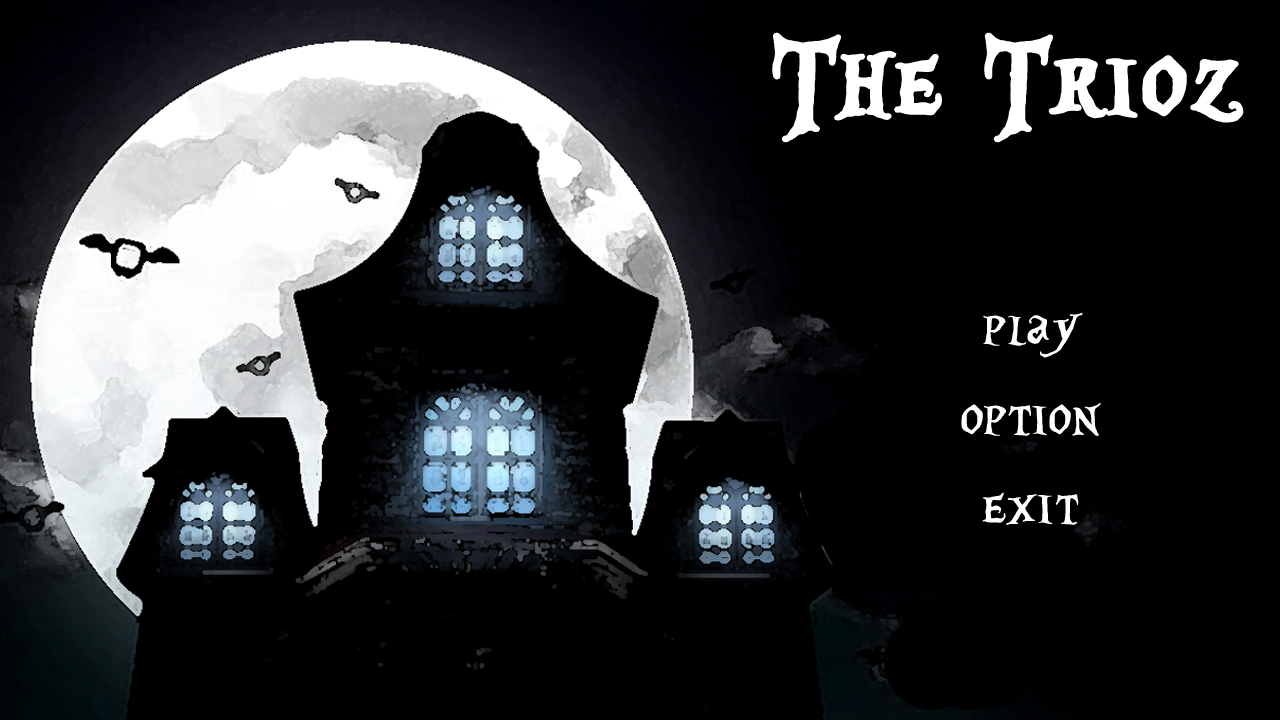
<style>
.page{position:relative;width:1280px;height:720px;background:#000000}
.page>*{position:absolute;margin:0}
.t1{font:142px "AliceinWonderland";color:#ffffff;font-weight:bold}
.t2{font:74px "AliceinWonderland";color:#ffffff}
</style>
<div class="page">
<p class="t1" style="left:772px;top:32px;width:472px;height:111px">The Trioz</p>
<p class="t2" style="left:983px;top:313px;width:100px;height:45px">play</p>
<p class="t2" style="left:961px;top:403px;width:140px;height:33px">option</p>
<p class="t2" style="left:982px;top:492px;width:97px;height:33px">exit</p>
</div>
